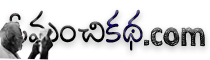
<style>
.page{position:relative;width:210px;height:60px;background:#ffffff}
.page>*{position:absolute;margin:0}
.t1{font:73.7px "NTR";scale:0.8 1}
.t2{font:63.2px "CabinSketch-Bold";scale:0.8 1}
</style>
<div class="page">
<p class="t1" style="left:5px;top:9px;width:200px;height:42px">ఓమంచికథ<span class="t2">.com</span></p>
</div>
